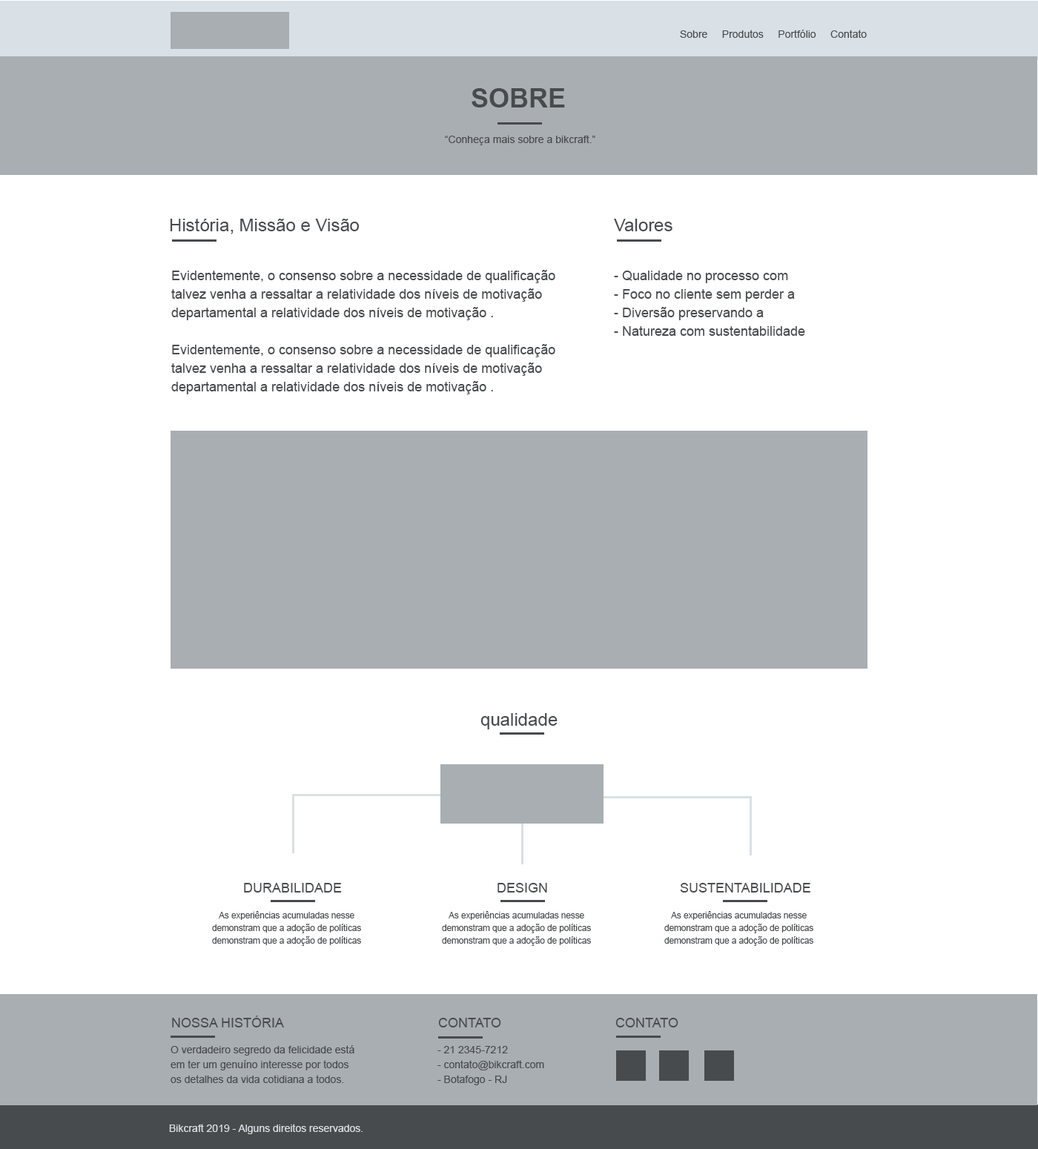
<style>
.page{position:relative;width:1038px;height:1149px;background:#ffffff}
.page>*{position:absolute;margin:0}
.t1{font:10.4px "ArialMT";color:#484b4d}
.t2{font:26.7px "Arial-BoldMT";color:#484b4d;text-transform:uppercase}
.t3{font:17.8px "ArialMT";color:#484b4d}
.t4{font:13.3px/18.5px "ArialMT";color:#484b4d}
.t5{font:13.3px "ArialMT";color:#484b4d;text-transform:uppercase}
.t6{font:8.7px/12.4px "ArialMT";color:#484b4d}
.t7{font:10.4px/14.8px "ArialMT";color:#484b4d}
.t8{font:10.4px "ArialMT";color:#d9e0e6}
</style>
<div class="page">
<p class="t1" style="left:680px;top:30px;width:187px;height:8px">Sobre     Produtos     Portfólio     Contato</p>
<p class="t2" style="left:471px;top:88px;width:94px;height:19px">SObre</p>
<p class="t1" style="left:445px;top:135px;width:150px;height:10px">“Conheça mais sobre a bikcraft.”</p>
<p class="t3" style="left:170px;top:218px;width:190px;height:16px">História, Missão e Visão</p>
<p class="t3" style="left:614px;top:219px;width:58px;height:12px">Valores</p>
<p class="t4" style="left:171px;top:270px;width:384px;height:124px">Evidentemente, o consenso sobre a necessidade de qualificação talvez venha a ressaltar a relatividade dos níveis de motivação departamental a relatividade dos níveis de motivação .<br><br>Evidentemente, o consenso sobre a necessidade de qualificação talvez venha a ressaltar a relatividade dos níveis de motivação departamental a relatividade dos níveis de motivação .</p>
<p class="t4" style="left:614px;top:271px;width:191px;height:65px">- Qualidade no processo com<br>- Foco no cliente sem perder a<br>- Diversão preservando a<br>- Natureza com sustentabilidade</p>
<p class="t3" style="left:480px;top:713px;width:77px;height:16px">qualidade</p>
<p class="t5" style="left:244px;top:883px;width:98px;height:10px">Durabilidade</p>
<p class="t5" style="left:497px;top:883px;width:50px;height:10px">design</p>
<p class="t5" style="left:680px;top:883px;width:130px;height:10px">sustentabilidade</p>
<p class="t6" style="left:212px;top:911px;width:149px;height:35px">As experiências acumuladas nesse                demonstram que a adoção de políticas demonstram que a adoção de políticas</p>
<p class="t6" style="left:442px;top:911px;width:149px;height:35px">As experiências acumuladas nesse                demonstram que a adoção de políticas demonstram que a adoção de políticas</p>
<p class="t6" style="left:664px;top:911px;width:149px;height:35px">As experiências acumuladas nesse                demonstram que a adoção de políticas demonstram que a adoção de políticas</p>
<p class="t5" style="left:172px;top:1016px;width:112px;height:11px">Nossa História</p>
<p class="t5" style="left:438px;top:1018px;width:63px;height:9px">Contato</p>
<p class="t5" style="left:615px;top:1018px;width:63px;height:9px">Contato</p>
<p class="t7" style="left:170px;top:1045px;width:184px;height:38px">O verdadeiro segredo da felicidade está <br>em ter um genuíno interesse por todos<br>os detalhes da vida cotidiana a todos.</p>
<p class="t7" style="left:437px;top:1046px;width:107px;height:39px">- 21 2345-7212<br>- contato@bikcraft.com<br>- Botafogo - RJ</p>
<p class="t8" style="left:169px;top:1124px;width:193px;height:10px">Bikcraft 2019 - Alguns direitos reservados.</p>
</div>
